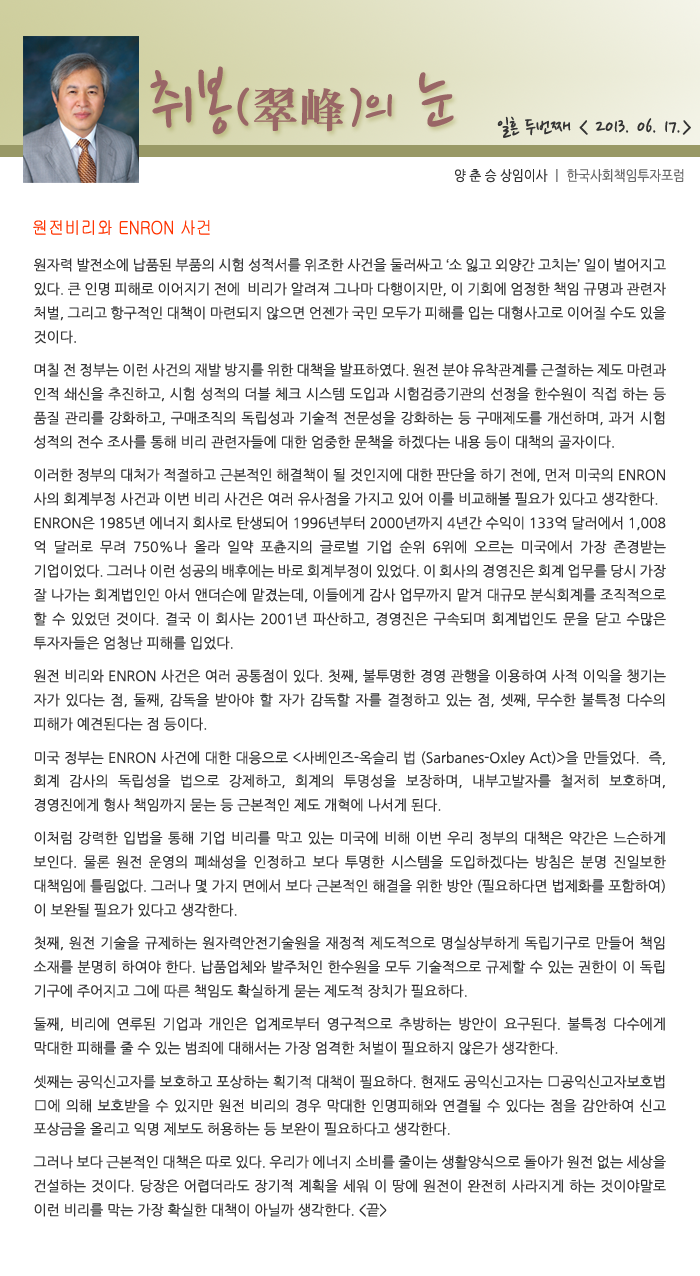
<style>
.page{position:relative;width:700px;height:1276px;background:#ffffff}
.page>*{position:absolute;margin:0}
.t1{font:77.5px "NanumPen";color:#996666}
.t2{font:60px "NanumPen";color:#996666}
.t3{font:48px "H2mjrE";color:#996666}
.t4{font:24px "NanumPen";color:#333333}
.t5{font:14px "NanumGothic";color:#666666;scale:0.9 1}
.t6{font:14px "NanumGothic";color:#333333;scale:0.9 1}
.t7{font:18px "Gulim";color:#ff3300;scale:0.9 1}
.t8{font:14px/24px "NanumGothic";color:#333333}
.t9{font:14px/6px "NanumGothic";color:#333333}
.t10{font:14px/9px "NanumGothic";color:#333333}
.t11{font:14px/24px "Gulim";color:#333333}
</style>
<div class="page">
<p class="t1" style="left:150px;top:66px;width:304px;height:69px">취봉<span class="t2">(</span><span class="t3">翠峰</span><span class="t2">)</span><span class="t2">의</span> 눈</p>
<p class="t4" style="left:497px;top:116px;width:194px;height:22px">일흔 두번째 &lt; 2013. 06. 17.&gt;</p>
<p class="t5" style="left:455px;top:169px;width:229px;height:14px"><span class="t6">양 춘 승 상임이사 </span>ㅣ 한국사회책임투자포럼</p>
<p class="t7" style="left:33px;top:220px;width:177px;height:15px">원전비리와 ENRON 사건</p>
<p class="t8" style="left:33px;top:258px;width:633px;height:959px;text-align:justify">원자력 발전소에 납품된 부품의 시험 성적서를 위조한 사건을 둘러싸고 ‘소 잃고 외양간 고치는’ 일이 벌어지고 있다. 큰 인명 피해로 이어지기 전에  비리가 알려져 그나마 다행이지만, 이 기회에 엄정한 책임 규명과 관련자 처벌, 그리고 항구적인 대책이 마련되지 않으면 언젠가 국민 모두가 피해를 입는 대형사고로 이어질 수도 있을 것<span class="t9">이</span><span class="t10">다. <br><br>며칠 전 정</span>부는 이런 사건의 재발 방지를 위한 대책을 발표하였다. 원전 분야 유착관계를 근절하는 제도 마련과 인적 쇄신을 추진하고, 시험 성적의 더블 체크 시스템 도입과 시험검증기관의 선정을 한수원이 직접 하는 등 품질 관리를 강화하고, 구매조직의 독립성과 기술적 전문성을 강화하는 등 구매제도를 개선하며, 과거 시험 성적의 전수 조사를 통해 비리<span class="t10"> 관련자들에 대한 엄중한 문책을 하겠다는 내용 등이 대책의 골자이다.<br><br>이러한 정부의 대처가 적절하고 근</span><span class="t9">본적인 해결책이</span> 될 것인지에 대한 판단을 하기 전에, 먼저 미국의 ENRON사의 회계부정 사건과 이번 비리 사건은 여러 유사점을 가지고 있어 이를 비교해볼 필요가 있다고 생각한다.<br>ENRON은 1985년 에너지 회사로 탄생되어 1996년부터 2000년까지 4년간 수익이 133억 달러에서 1,008억 달러로 무려 750%나 올라 일약 포츈지의 글로벌 기업 순위 6위에 오르는 미국에서 가장 존경받는 기업이었다. 그러나 이런 성공의 배후에는 바로 회계부정이 있었다. 이 회사의 경영진은 회계 업무를 당시 가장 잘 나가는 회계법인인 아서 앤더슨에 맡겼는데, 이들에게 감사 업무까지 맡겨 대규모 분식회계를 조직적으로 할 수 있었던 것이다. 결국 이 회사는 2001년 파산하고, 경영진은 구속되며 회계법인도 문을 닫고 수많은 투자자들은 엄청난 피<span class="t10">해를 입었다.<br><br>원전 비리와 ENRON 사건은 여</span>러 공통점이 있다. 첫째, 불투명한 경영 관행을 이용하여 사적 이익을 챙기는 자가 있다는 점, 둘째, 감독을 받아야 할 자가 감독할 자를 결정하고 있는 점, 셋째, 무수한 불특정 다수의 피해가 예견된다는 점 <span class="t10">등이다.<br><br>미국 정부는 ENRON 사건에 대한 대응</span>으로 <span class="t11">&lt;</span>사베인즈-옥슬리 법 (Sarbanes-Oxley Act)<span class="t11">&gt;</span>을 만들었다.  즉, 회계 감사의 독립성을 법으로 강제하고, 회계의 투명성을 보장하며, 내부고발자를 철저히 보호하며, 경영진에게 형사 책<span class="t10">임까지 묻는 등 근본적인 제도 개혁에 나서게 된다.<br><br>이처럼 강력한 입법을 통해 기</span>업 비리를 막고 있는 미국에 비해 이번 우리 정부의 대책은 약간은 느슨하게 보인다. 물론 원전 운영의 폐쇄성을 인정하고 보다 투명한 시스템을 도입하겠다는 방침은 분명 진일보한 대책임에 틀림없다. 그러나 몇 가지 면에서 보다 근본적인 해결을 위한 방안 (필요하다면 법제화를 포함하여)이 보완될 필요가 있다고 <span class="t10">생각한다.<br><br>첫째, 원전 기술을 규제하는 원자력안전기</span>술원을 재정적 제도적으로 명실상부하게 독립기구로 만들어 책임 소재를 분명히 하여야 한다. 납품업체와 발주처인 한수원을 모두 기술적으로 규제할 수 있는 권한이 이 독립 기구에 주어지고 그에 따른 책임도 확실하게 묻<span class="t10">는 제도적 장치가 필요하다.<br><br>둘째, 비리에 연루된 기업과 개인은 업계로부터 영구적으</span>로 추방하는 방안이 요구된다. 불특정 다수에게 막대한 피해를 줄 수 있는 범죄에 대해<span class="t10">서는 가장 엄격한 처벌이 필요하지 않은가 생각한다. <br><br>셋째는 공익신고자를 보호하고 포상하는 획기적 대책</span>이 필요하다. 현재도 공익신고자는 <span class="t11">⟨</span>공익신고자보호법<span class="t11">⟩</span>에 의해 보호받을 수 있지만 원전 비리의 경우 막대한 인명피해와 연결될 수 있다는 점을 감안하여 신고 포상금을 올리고 익명 제보도 허용하는 등 보완이 <span class="t10">필요하다고 생각한다. <br><br>그러나 보다 근본적인 대책은 따로 있다. 우리가 에너지 소</span>비를 줄이는 생활양식으로 돌아가 원전 없는 세상을 건설하는 것이다. 당장은 어렵더라도 장기적 계획을 세워 이 땅에 원전이 완전히 사라지게 하는 것이야말로 이런 비리를 막는 가장 확실한 대책이 아닐까 생각한다. &lt;끝&gt;</p>
</div>
